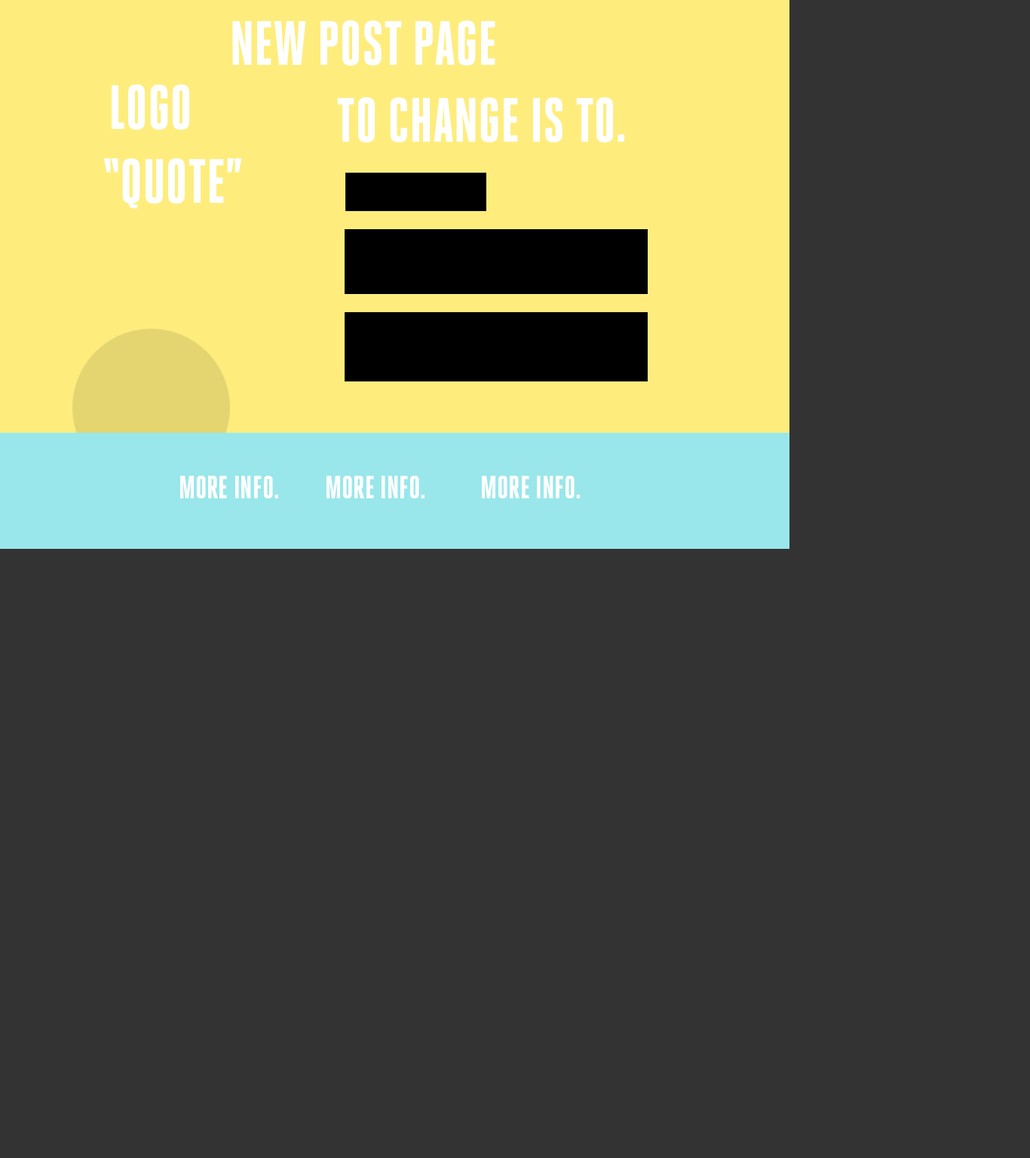
<style>
.page{position:relative;width:1030px;height:1158px;background:#333333}
.page>*{position:absolute;margin:0}
.t1{font:62.4px "HeroicCondensed-Heavy";color:#ffffff;text-transform:uppercase}
.t2{font:32.1px "HeroicCondensed-Heavy";color:#ffffff;text-transform:uppercase}
</style>
<div class="page">
<p class="t1" style="left:232px;top:20px;width:263px;height:46px">New Post page</p>
<p class="t1" style="left:112px;top:84px;width:77px;height:46px">Logo</p>
<p class="t1" style="left:337px;top:97px;width:287px;height:45px">To Change is to.</p>
<p class="t1" style="left:103px;top:158px;width:139px;height:51px">“quote”</p>
<p class="t2" style="left:180px;top:476px;width:98px;height:22px">More Info.</p>
<p class="t2" style="left:326px;top:476px;width:98px;height:22px">More Info.</p>
<p class="t2" style="left:482px;top:476px;width:98px;height:22px">More Info.</p>
</div>
